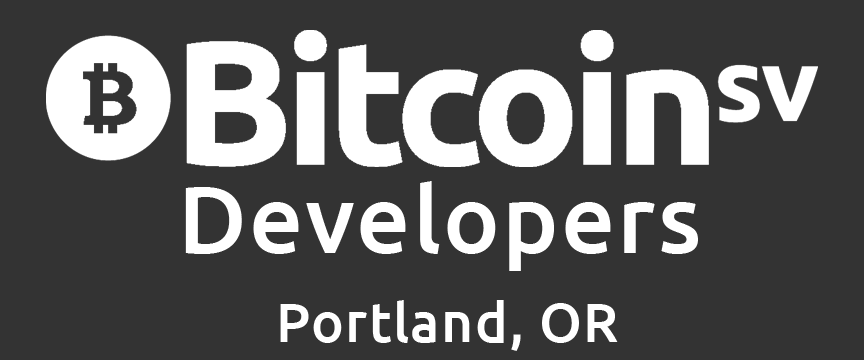
<style>
.page{position:relative;width:864px;height:360px;background:#333333}
.page>*{position:absolute;margin:0}
.t1{font:95.4px "Ubuntu-Medium";letter-spacing:0.02em;color:#ffffff}
.t2{font:55.4px "Ubuntu-Medium";letter-spacing:0.02em;color:#ffffff}
</style>
<div class="page">
<p class="t1" style="left:185px;top:181px;width:513px;height:90px">Developers</p>
<p class="t2" style="left:280px;top:300px;width:338px;height:51px">Portland, OR</p>
</div>
